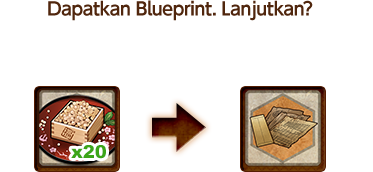
<style>
.page{position:relative;width:373px;height:172px;background:#ffffff}
.page>*{position:absolute;margin:0}
.t1{font:18px "UDShinGoPro-DeBold";letter-spacing:-0.04em;color:#50260d}
</style>
<div class="page">
<p class="t1" style="left:48px;top:0px;width:265px;height:21px">Dapatkan Blueprint. Lanjutkan?</p>
</div>
